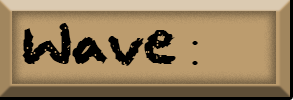
<style>
.page{position:relative;width:293px;height:100px;background:#bc9c6e}
.page>*{position:absolute;margin:0}
.t1{font:50px "squeakychalksound";color:#000000}
.t2{font:50px "TimesNewRomanPSMT";color:#000000}
</style>
<div class="page">
<p class="t1" style="left:22px;top:23px;width:176px;height:43px">Wave<span class="t2"> :</span></p>
</div>
